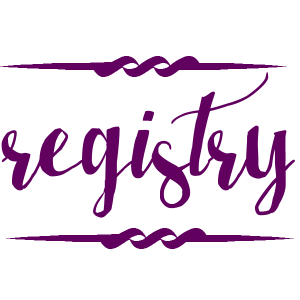
<style>
.page{position:relative;width:300px;height:300px;background:#ffffff}
.page>*{position:absolute;margin:0}
.t1{font:90px "BergamotOrnaments";color:#61005f}
.t2{font:140px "LaserMetal";color:#61005f}
</style>
<div class="page">
<p class="t1" style="left:0px;top:56px;width:287px;height:21px">W</p>
<p class="t2" style="left:1px;top:72px;width:294px;height:146px">registry</p>
<p class="t1" style="left:6px;top:228px;width:288px;height:21px">W</p>
</div>
